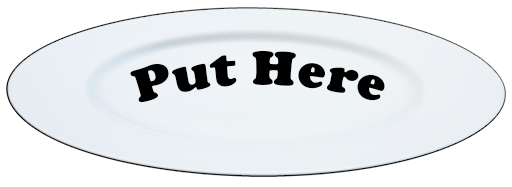
<style>
.page{position:relative;width:512px;height:187px;background:#ffffff}
.page>*{position:absolute;margin:0}
.t1{font:48px "CooperBlack";color:#000000}
</style>
<div class="page">
<p class="t1" style="left:130px;top:50px;width:255px;height:53px">Put Here</p>
</div>
